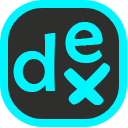
<style>
.page{position:relative;width:128px;height:128px;background:#2e2e2c}
.page>*{position:absolute;margin:0}
.t1{font:83.5px "BerlinSansFB-Reg";color:#00f6ff}
</style>
<div class="page">
<p class="t1" style="left:65px;top:22px;width:38px;height:41px">e</p>
<p class="t1" style="left:13px;top:33px;width:43px;height:59px">d</p>
</div>
